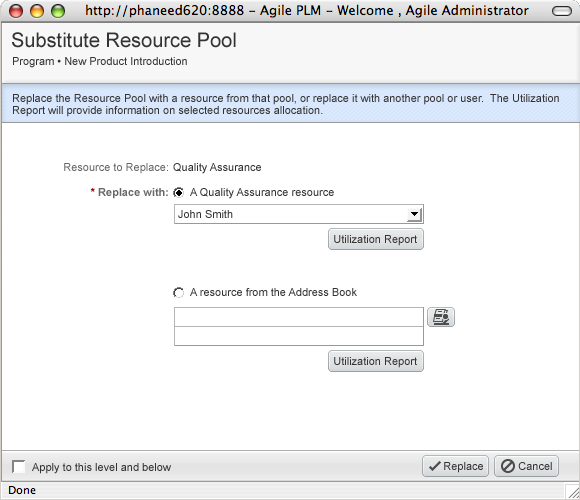
<style>
.page{position:relative;width:580px;height:500px;background:#ffffff}
.page>*{position:absolute;margin:0}
.t1{font:20px "ArialMT";color:#333333}
.t2{font:11px "ArialMT";color:#333333}
.t3{font:11px/12px "ArialMT";color:#333333}
.t4{font:11px "ArialMT";color:#666666}
.t5{font:11px "Arial-BoldMT";color:#666666}
.t6{font:11px "Arial-BoldMT";color:#990000}
</style>
<div class="page">
<p class="t1" style="left:12px;top:32px;width:224px;height:16px">Substitute Resource Pool</p>
<p class="t2" style="left:13px;top:57px;width:174px;height:11px">Program • New Product Introduction</p>
<p class="t3" style="left:13px;top:94px;width:546px;height:23px">Replace the Resource Pool with a resource from that pool, or replace it with another pool or user.  The Utilization<br>Report will provide information on selected resources allocation.</p>
<p class="t4" style="left:64px;top:163px;width:104px;height:11px">Resource to Replace:</p>
<p class="t2" style="left:173px;top:163px;width:88px;height:11px">Quality Assurance</p>
<p class="t5" style="left:90px;top:188px;width:78px;height:11px"><span class="t6">*</span> Replace with:</p>
<p class="t2" style="left:190px;top:188px;width:144px;height:11px">A Quality Assurance resource</p>
<p class="t2" style="left:178px;top:210px;width:55px;height:8px">John Smith</p>
<p class="t2" style="left:334px;top:235px;width:83px;height:11px">Utilization Report</p>
<p class="t2" style="left:190px;top:288px;width:167px;height:8px">A resource from the Address Book</p>
<p class="t2" style="left:334px;top:357px;width:83px;height:11px">Utilization Report</p>
<p class="t2" style="left:444px;top:462px;width:39px;height:11px">Replace</p>
<p class="t2" style="left:518px;top:462px;width:34px;height:8px">Cancel</p>
<p class="t2" style="left:32px;top:463px;width:139px;height:11px">Apply to this level and below</p>
</div>
